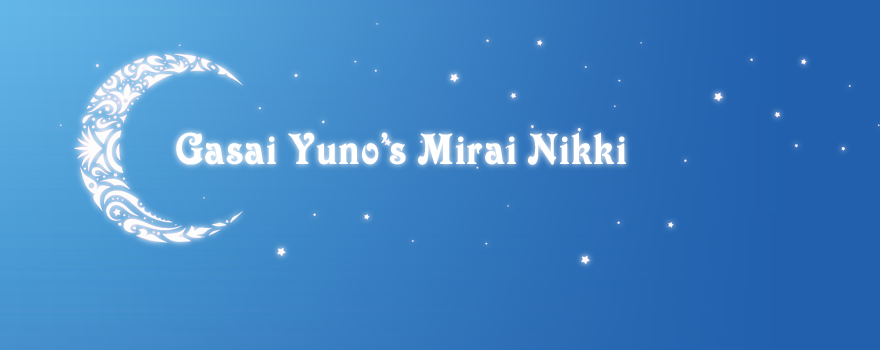
<style>
.page{position:relative;width:880px;height:350px}
.page>*{position:absolute;margin:0}
.t1{font:47.1px "VictorianLetPlain";letter-spacing:0.02em;color:#ffffff}
</style>
<div class="page">
<p class="t1" style="left:176px;top:132px;width:451px;height:33px">Gasai Yuno’s Mirai Nikki</p>
</div>
